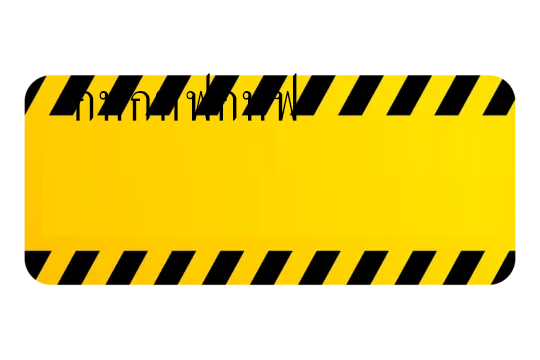
<style>
.page{position:relative;width:540px;height:360px;background:#ffffff}
.page>*{position:absolute;margin:0}
.t1{font:74.2px "AngsanaUPC";letter-spacing:0.025em;color:#000000;text-transform:uppercase;scale:0.83 1}
</style>
<div class="page">
<p class="t1" style="left:74px;top:73px;width:223px;height:48px">กหกหฟกหฟ</p>
</div>
